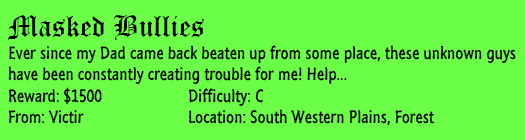
<style>
.page{position:relative;width:525px;height:140px;background:#6cff47}
.page>*{position:absolute;margin:0}
.t1{font:18px "SegoeMarker";color:#000000}
.t2{font:30px "OldEnglishTextMT";color:#000000}
</style>
<div class="page">
<p class="t1" style="left:8px;top:15px;width:508px;height:111px"><span class="t2">Masked Bullies<br></span>Ever since my Dad came back beaten up from some place, these unknown guys<br>have been constantly creating trouble for me! Help...<br>Reward: $1500   Difficulty: C<br>From: Victir   Location: South Western Plains, Forest</p>
</div>
